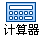
<style>
.page{position:relative;width:42px;height:36px;background:#ffffff}
.page>*{position:absolute;margin:0}
.t1{font:12px "SimSun";letter-spacing:0.02em;color:#000000}
</style>
<div class="page">
<p class="t1" style="left:4px;top:24px;width:35px;height:11px">计算器</p>
</div>
